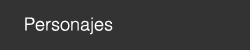
<style>
.page{position:relative;width:250px;height:50px;background:#333333}
.page>*{position:absolute;margin:0}
.t1{font:18px "HelvLight-Normal";color:#ffffff}
</style>
<div class="page">
<p class="t1" style="left:25px;top:17px;width:88px;height:18px">Personajes</p>
</div>
